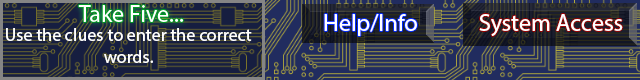
<style>
.page{position:relative;width:640px;height:80px}
.page>*{position:absolute;margin:0}
.t1{font:24px "MyriadPro-Regular";color:#ffffff}
.t2{font:18px "MyriadPro-Regular";color:#ffffff}
</style>
<div class="page">
<p class="t1" style="left:324px;top:14px;width:93px;height:22px">Help/Info</p>
<p class="t1" style="left:479px;top:14px;width:144px;height:22px">System Access</p>
<p class="t2" style="left:6px;top:28px;width:246px;height:35px;text-align:center">Use the clues to enter the correct words.</p>
</div>
